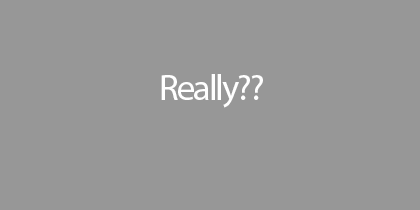
<style>
.page{position:relative;width:420px;height:210px;background:#979797}
.page>*{position:absolute;margin:0}
.t1{font:36px "MyriadPro-Regular";letter-spacing:-0.05em;color:#ffffff}
</style>
<div class="page">
<p class="t1" style="left:161px;top:74px;width:102px;height:34px">Really??</p>
</div>
